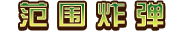
<style>
.page{position:relative;width:183px;height:31px;background:#ffffff}
.page>*{position:absolute;margin:0}
.t1{font:27px "JZhongYi";letter-spacing:0.3em;scale:1.11 1}
</style>
<div class="page">
<p class="t1" style="left:20px;top:2px;width:144px;height:25px">范围炸弹</p>
</div>
